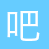
<style>
.page{position:relative;width:49px;height:49px;background:#66ccff}
.page>*{position:absolute;margin:0}
.t1{font:36px "HiraginoSansGB-W3";color:#ffffff}
</style>
<div class="page">
<p class="t1" style="left:7px;top:10px;width:33px;height:31px">吧</p>
</div>
